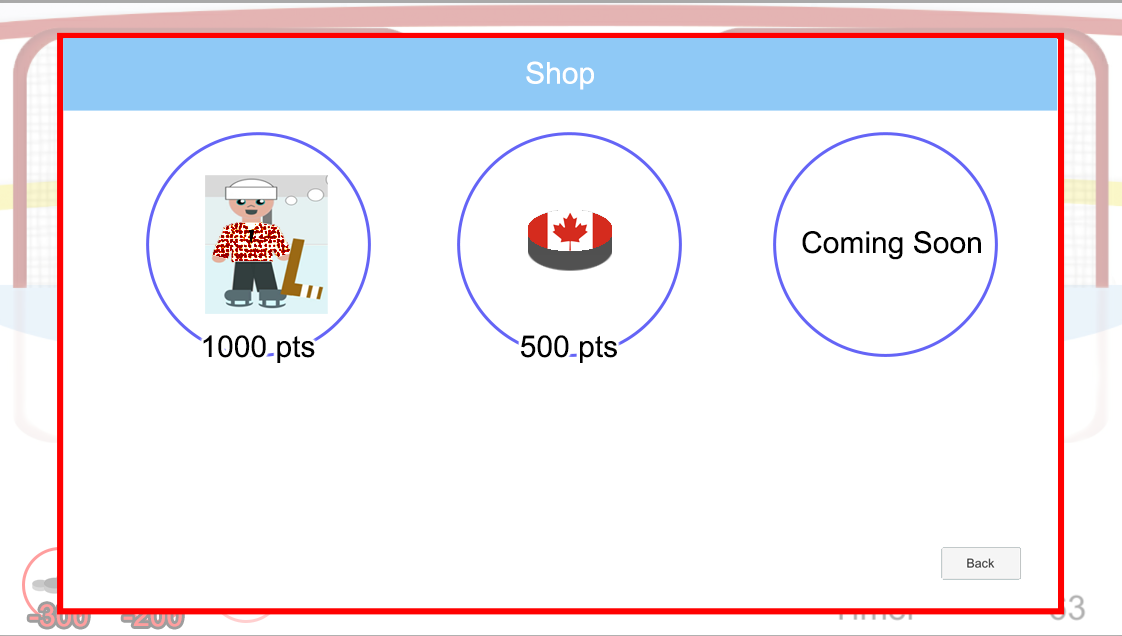
<style>
.page{position:relative;width:1122px;height:636px;background:#ffffff}
.page>*{position:absolute;margin:0}
.t1{font:30px "ArialMT";color:#ffffff}
.t2{font:30px "ArialMT";color:#000000}
.t3{font:30px "ArialMT"}
</style>
<div class="page">
<p class="t1" style="left:526px;top:61px;width:68px;height:29px">Shop</p>
<p class="t2" style="left:802px;top:231px;width:179px;height:29px">Coming Soon</p>
<p class="t2" style="left:203px;top:335px;width:112px;height:28px">1000 pts</p>
<p class="t2" style="left:520px;top:335px;width:97px;height:28px">500 pts</p>
<p class="t3" style="left:29px;top:604px;width:59px;height:23px">-300</p>
<p class="t3" style="left:123px;top:604px;width:59px;height:23px">-200</p>
</div>
